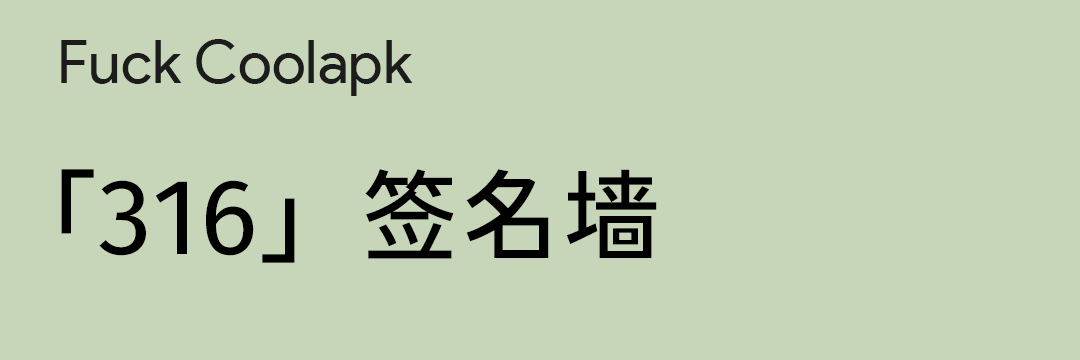
<style>
.page{position:relative;width:1080px;height:360px;background:#c7d6b8}
.page>*{position:absolute;margin:0}
.t1{font:60px "ProductSans-Regular";color:#1c1c1c}
.t2{font:100px "GlowSansJ-Normal-Medium";letter-spacing:0.01em;color:#000000}
</style>
<div class="page">
<p class="t1" style="left:61px;top:39px;width:352px;height:57px">Fuck Coolapk</p>
<p class="t2" style="left:61px;top:169px;width:596px;height:94px">「316」签名墙</p>
</div>
